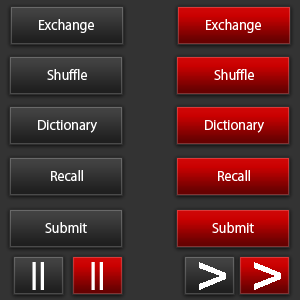
<style>
.page{position:relative;width:300px;height:300px;background:#333333}
.page>*{position:absolute;margin:0}
.t1{font:13px "KozGoPr6N-Regular";color:#ffffff}
.t2{font:24px "BlackoakStd";color:#ffffff}
.t3{font:48px "BlackoakStd";color:#ffffff}
</style>
<div class="page">
<p class="t1" style="left:39px;top:19px;width:55px;height:14px">Exchange</p>
<p class="t1" style="left:206px;top:19px;width:55px;height:14px">Exchange</p>
<p class="t1" style="left:47px;top:69px;width:40px;height:11px">Shuffle</p>
<p class="t1" style="left:214px;top:69px;width:40px;height:11px">Shuffle</p>
<p class="t1" style="left:38px;top:120px;width:59px;height:13px">Dictionary</p>
<p class="t1" style="left:205px;top:120px;width:59px;height:13px">Dictionary</p>
<p class="t1" style="left:51px;top:170px;width:32px;height:11px">Recall</p>
<p class="t1" style="left:218px;top:170px;width:32px;height:11px">Recall</p>
<p class="t1" style="left:45px;top:222px;width:42px;height:11px">Submit</p>
<p class="t1" style="left:212px;top:222px;width:42px;height:11px">Submit</p>
<p class="t2" style="left:32px;top:262px;width:12px;height:28px">||</p>
<p class="t2" style="left:91px;top:262px;width:12px;height:28px">||</p>
<p class="t3" style="left:199px;top:262px;width:27px;height:28px">&gt;</p>
<p class="t3" style="left:254px;top:262px;width:27px;height:28px">&gt;</p>
</div>
